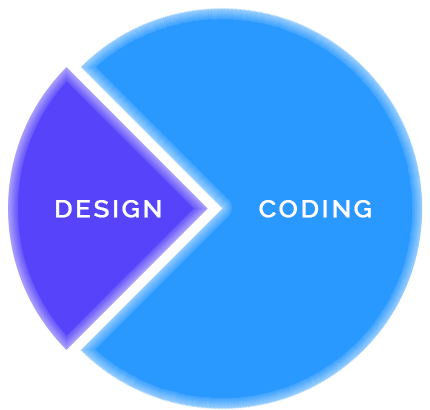
<style>
.page{position:relative;width:430px;height:410px;background:#2998ff}
.page>*{position:absolute;margin:0}
.t1{font:25px "Raleway-Medium";letter-spacing:0.1em;color:#ffffff;text-transform:uppercase;font-weight:bold}
</style>
<div class="page">
<p class="t1" style="left:56px;top:200px;width:105px;height:18px">Design</p>
<p class="t1" style="left:259px;top:200px;width:112px;height:18px">Coding</p>
</div>
